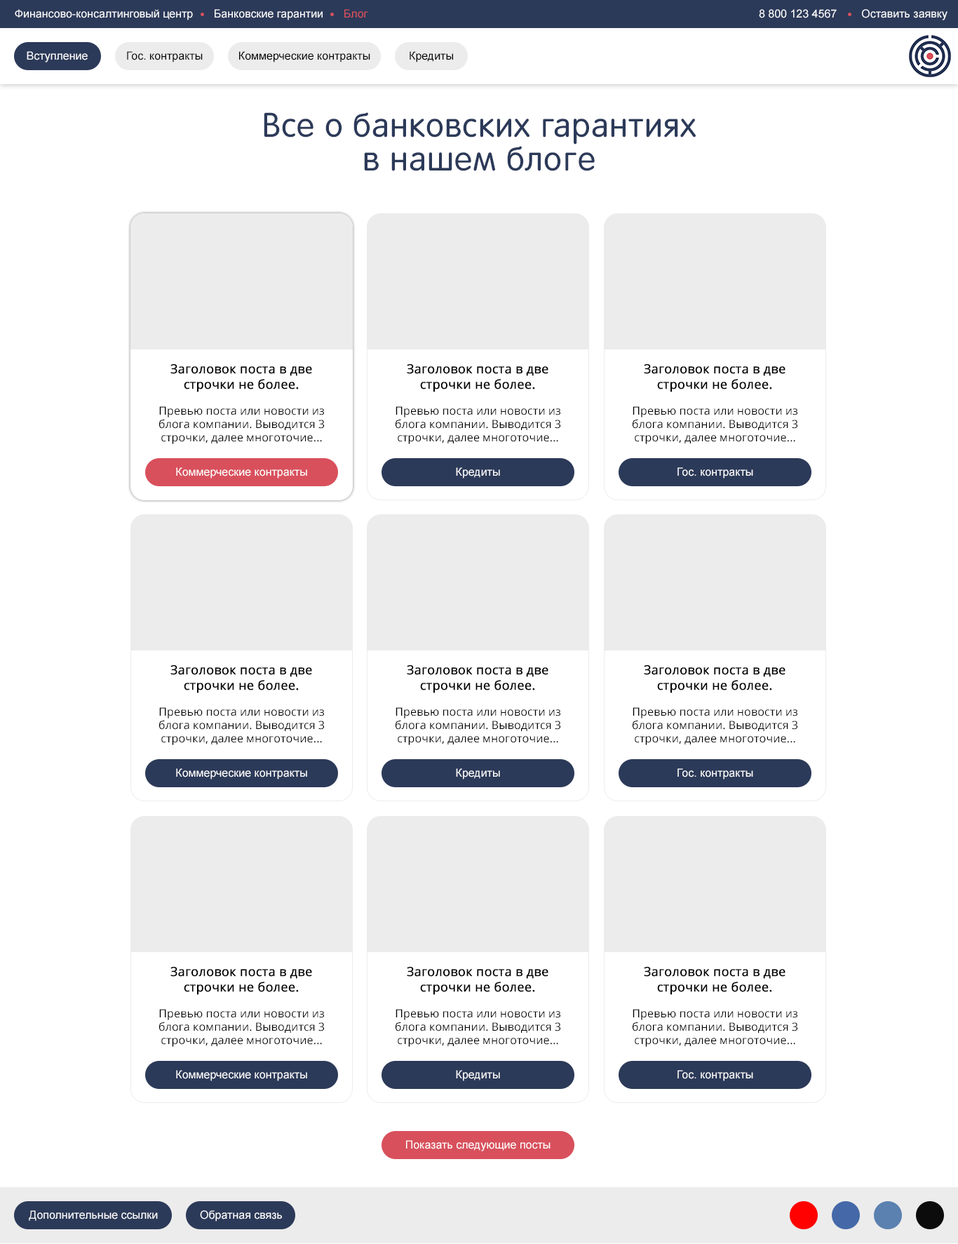
<style>
.page{position:relative;width:958px;height:1244px;background:#ffffff}
.page>*{position:absolute;margin:0}
.t1{font:11.2px "ArialMT";color:#ffffff}
.t2{font:11.2px "ArialMT";color:#d8505c}
.t3{font:11.2px "ArialMT";color:#010101}
.t4{font:33.7px/33.7px "RotondaC";letter-spacing:0.025em;color:#2c3a59}
.t5{font:12.6px "OpenSans";color:#000000;font-weight:bold}
.t6{font:11.2px "OpenSans";color:#000000}
</style>
<div class="page">
<p class="t1" style="left:15px;top:9px;width:178px;height:11px">Финансово-консалтинговый центр</p>
<p class="t1" style="left:215px;top:9px;width:108px;height:11px">Банковские гарантии</p>
<p class="t2" style="left:345px;top:9px;width:23px;height:9px">Блог</p>
<p class="t1" style="left:759px;top:9px;width:78px;height:9px">8 800 123 4567</p>
<p class="t1" style="left:862px;top:9px;width:86px;height:11px">Оставить заявку</p>
<p class="t1" style="left:27px;top:51px;width:61px;height:11px">Вступление</p>
<p class="t3" style="left:127px;top:51px;width:76px;height:11px">Гос. контракты</p>
<p class="t3" style="left:239px;top:51px;width:131px;height:11px">Коммерческие контракты</p>
<p class="t3" style="left:410px;top:51px;width:43px;height:11px">Кредиты</p>
<p class="t4" style="left:264px;top:112px;width:432px;height:59px;text-align:center">Все о банковских гарантиях<br>в нашем блоге</p>
<p class="t5" style="left:171px;top:364px;width:141px;height:28px;text-align:center">Заголовок поста в две<br>строчки не более.</p>
<p class="t5" style="left:407px;top:364px;width:142px;height:28px;text-align:center">Заголовок поста в две<br>строчки не более.</p>
<p class="t5" style="left:644px;top:364px;width:142px;height:28px;text-align:center">Заголовок поста в две<br>строчки не более.</p>
<p class="t6" style="left:159px;top:406px;width:165px;height:38px;text-align:center">Превью поста или новости из блога компании. Выводится 3 строчки, далее многоточие...</p>
<p class="t6" style="left:396px;top:406px;width:165px;height:38px;text-align:center">Превью поста или новости из блога компании. Выводится 3 строчки, далее многоточие...</p>
<p class="t6" style="left:633px;top:406px;width:165px;height:38px;text-align:center">Превью поста или новости из блога компании. Выводится 3 строчки, далее многоточие...</p>
<p class="t1" style="left:176px;top:467px;width:131px;height:12px">Коммерческие контракты</p>
<p class="t1" style="left:456px;top:467px;width:44px;height:12px">Кредиты</p>
<p class="t1" style="left:678px;top:467px;width:76px;height:12px">Гос. контракты</p>
<p class="t5" style="left:171px;top:665px;width:141px;height:28px;text-align:center">Заголовок поста в две<br>строчки не более.</p>
<p class="t5" style="left:407px;top:665px;width:142px;height:28px;text-align:center">Заголовок поста в две<br>строчки не более.</p>
<p class="t5" style="left:644px;top:665px;width:142px;height:28px;text-align:center">Заголовок поста в две<br>строчки не более.</p>
<p class="t6" style="left:159px;top:707px;width:165px;height:38px;text-align:center">Превью поста или новости из блога компании. Выводится 3 строчки, далее многоточие...</p>
<p class="t6" style="left:396px;top:707px;width:165px;height:38px;text-align:center">Превью поста или новости из блога компании. Выводится 3 строчки, далее многоточие...</p>
<p class="t6" style="left:633px;top:707px;width:165px;height:38px;text-align:center">Превью поста или новости из блога компании. Выводится 3 строчки, далее многоточие...</p>
<p class="t1" style="left:176px;top:768px;width:131px;height:12px">Коммерческие контракты</p>
<p class="t1" style="left:456px;top:768px;width:44px;height:12px">Кредиты</p>
<p class="t1" style="left:678px;top:768px;width:76px;height:12px">Гос. контракты</p>
<p class="t5" style="left:171px;top:967px;width:141px;height:28px;text-align:center">Заголовок поста в две<br>строчки не более.</p>
<p class="t5" style="left:407px;top:967px;width:142px;height:28px;text-align:center">Заголовок поста в две<br>строчки не более.</p>
<p class="t5" style="left:644px;top:967px;width:142px;height:28px;text-align:center">Заголовок поста в две<br>строчки не более.</p>
<p class="t6" style="left:159px;top:1009px;width:165px;height:38px;text-align:center">Превью поста или новости из блога компании. Выводится 3 строчки, далее многоточие...</p>
<p class="t6" style="left:396px;top:1009px;width:165px;height:38px;text-align:center">Превью поста или новости из блога компании. Выводится 3 строчки, далее многоточие...</p>
<p class="t6" style="left:633px;top:1009px;width:165px;height:38px;text-align:center">Превью поста или новости из блога компании. Выводится 3 строчки, далее многоточие...</p>
<p class="t1" style="left:176px;top:1070px;width:131px;height:11px">Коммерческие контракты</p>
<p class="t1" style="left:456px;top:1070px;width:44px;height:11px">Кредиты</p>
<p class="t1" style="left:678px;top:1070px;width:76px;height:11px">Гос. контракты</p>
<p class="t1" style="left:406px;top:1140px;width:145px;height:11px">Показать следующие посты</p>
<p class="t1" style="left:29px;top:1210px;width:129px;height:11px">Дополнительные ссылки</p>
<p class="t1" style="left:200px;top:1210px;width:82px;height:12px">Обратная связь</p>
</div>
